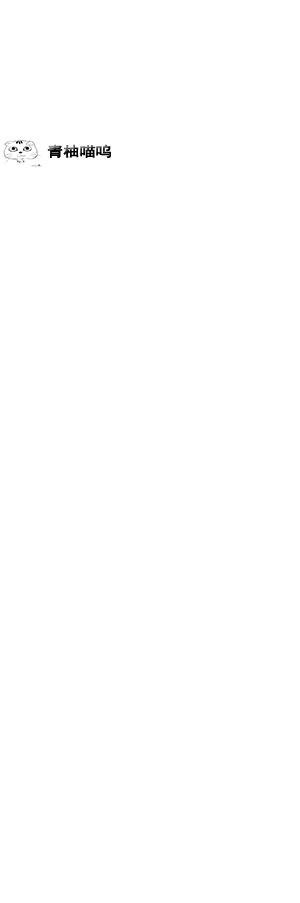
<style>
.page{position:relative;width:300px;height:903px;background:#ffffff}
.page>*{position:absolute;margin:0}
.t1{font:14px "SimHei";color:#060606;font-weight:bold;scale:1.13 1}
</style>
<div class="page">
<p class="t1" style="left:47px;top:144px;width:64px;height:14px">青柚喵呜</p>
</div>
